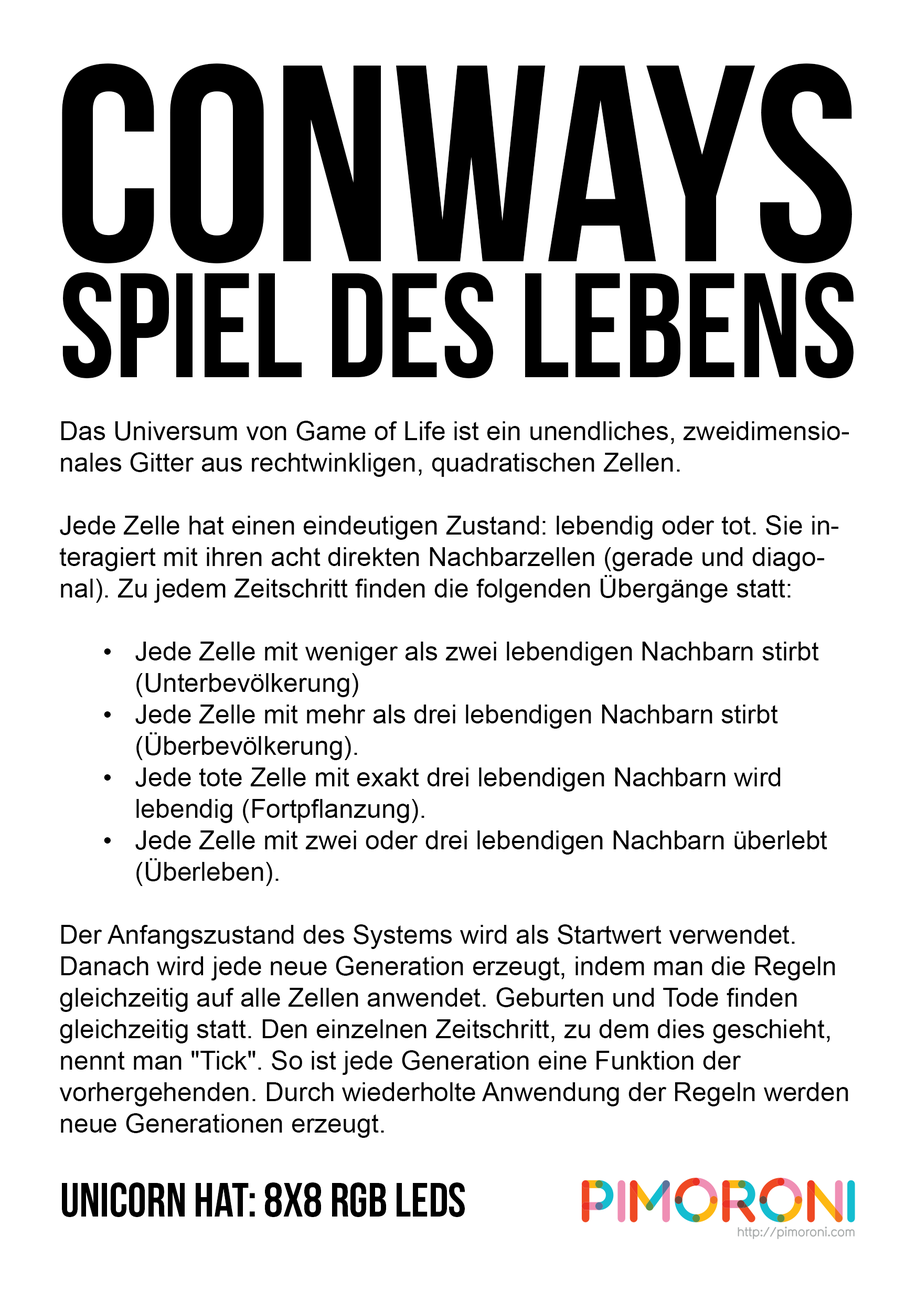
<style>
.page{position:relative;width:917px;height:1301px;background:#ffffff}
.page>*{position:absolute;margin:0}
.t1{font:279.7px "BebasNeue";color:#000000}
.t2{font:148.3px "BebasNeue";color:#000000}
.t3{font:26.2px "ArialMT";color:#000000}
.t4{font:48.1px "BebasNeue";color:#000000}
</style>
<div class="page">
<p class="t1" style="left:62px;top:63px;width:790px;height:200px">Conways</p>
<p class="t2" style="left:62px;top:272px;width:791px;height:106px">Spiel des Lebens</p>
<p class="t3" style="left:59px;top:421px;width:790px;height:717px">Das Universum von Game of Life ist ein unendliches, zweidimensionales Gitter aus rechtwinkligen, quadratischen Zellen.<br><br>Jede Zelle hat einen eindeutigen Zustand: lebendig oder tot. Sie interagiert mit ihren acht direkten Nachbarzellen (gerade und diagonal). Zu jedem Zeitschritt finden die folgenden Übergänge statt:<br><br>•  Jede Zelle mit weniger als zwei lebendigen Nachbarn stirbt <br>  (Unterbevölkerung)<br>•  Jede Zelle mit mehr als drei lebendigen Nachbarn stirbt <br>  (Überbevölkerung).<br>•  Jede tote Zelle mit exakt drei lebendigen Nachbarn wird <br>  lebendig (Fortpflanzung).<br>•  Jede Zelle mit zwei oder drei lebendigen Nachbarn überlebt <br>  (Überleben).<br><br>Der Anfangszustand des Systems wird als Startwert verwendet. Danach wird jede neue Generation erzeugt, indem man die Regeln gleichzeitig auf alle Zellen anwendet. Geburten und Tode finden gleichzeitig statt. Den einzelnen Zeitschritt, zu dem dies geschieht, nennt man "Tick". So ist jede Generation eine Funktion der vorhergehenden. Durch wiederholte Anwendung der Regeln werden neue Generationen erzeugt.</p>
<p class="t4" style="left:62px;top:1182px;width:403px;height:35px">Unicorn HAT: 8x8 RGB LEDs</p>
</div>
